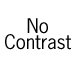
<style>
.page{position:relative;width:75px;height:73px;background:#ffffff}
.page>*{position:absolute;margin:0}
.t1{font:19px/16px "NewsGothicStd";letter-spacing:-0.005em;color:#000000}
</style>
<div class="page">
<p class="t1" style="left:5px;top:18px;width:67px;height:32px;text-align:center">No<br>Contrast</p>
</div>
